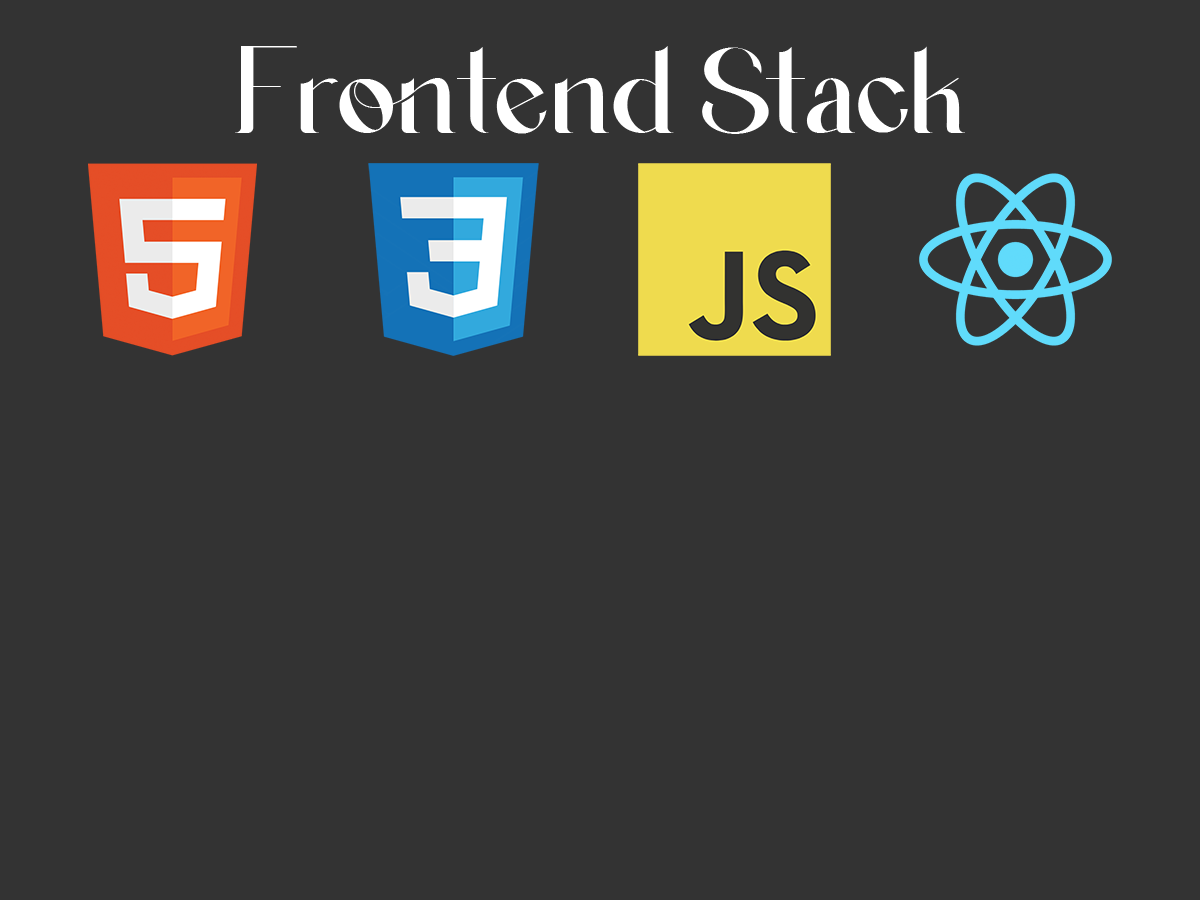
<style>
.page{position:relative;width:1200px;height:900px;background:#333333}
.page>*{position:absolute;margin:0}
.t1{font:63.9px "Agraham-PersonalUse";color:#ffffff}
</style>
<div class="page">
<p class="t1" style="left:235px;top:46px;width:730px;height:88px">Frontend Stack</p>
</div>
